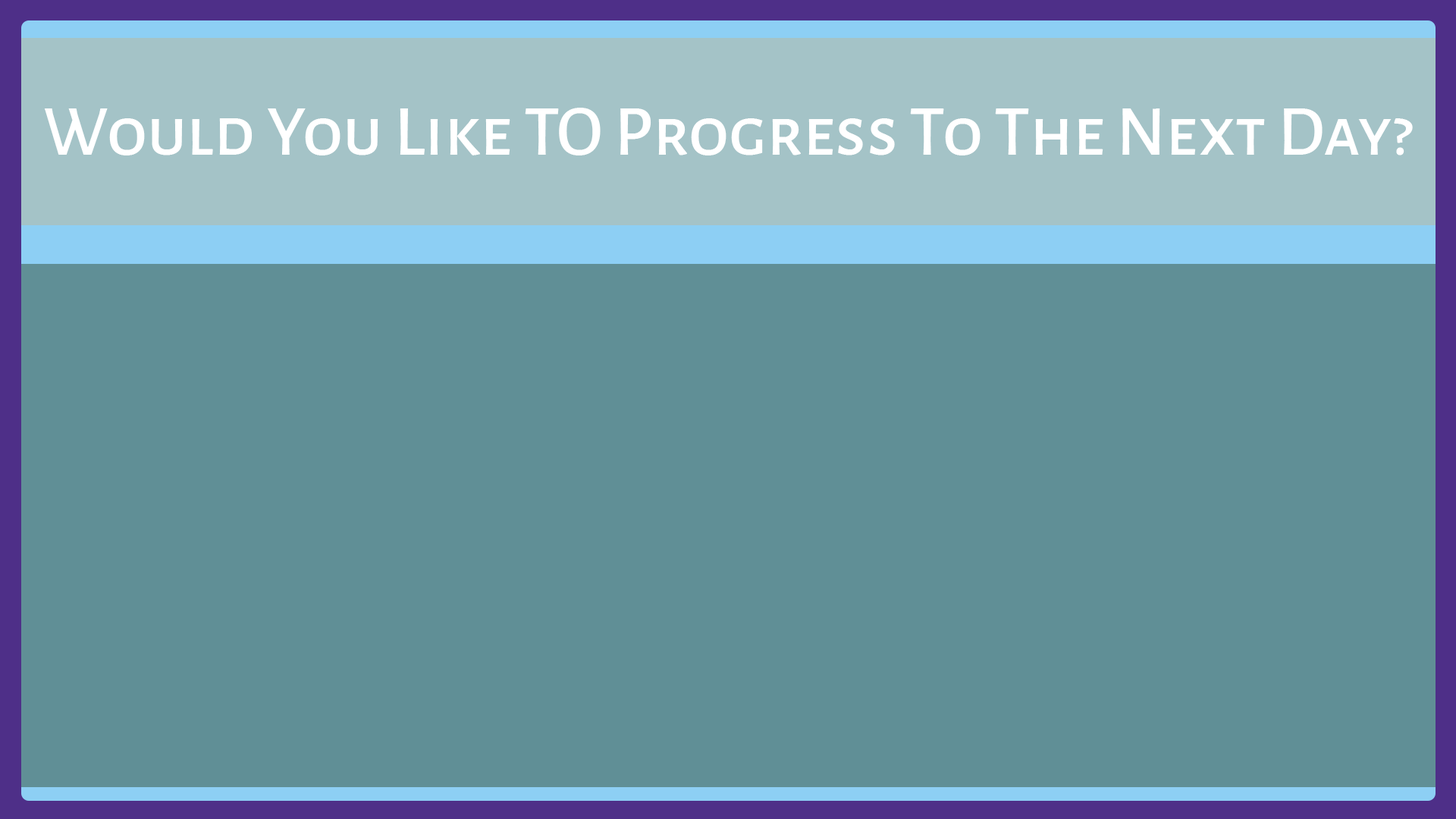
<style>
.page{position:relative;width:1456px;height:819px;background:#608f96}
.page>*{position:absolute;margin:0}
.t1{font:72px "AlegreyaSansSC-Medium";color:#ffffff}
</style>
<div class="page">
<p class="t1" style="left:44px;top:108px;width:1369px;height:47px">Would You Like TO Progress To The Next Day?</p>
</div>
